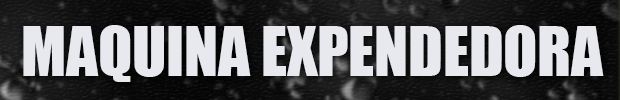
<style>
.page{position:relative;width:620px;height:100px;background:#e7e9ee}
.page>*{position:absolute;margin:0}
.t1{font:62.5px "Impact";color:#e7e9ee}
</style>
<div class="page">
<p class="t1" style="left:23px;top:25px;width:581px;height:57px">MAQUINA EXPENDEDORA</p>
</div>
